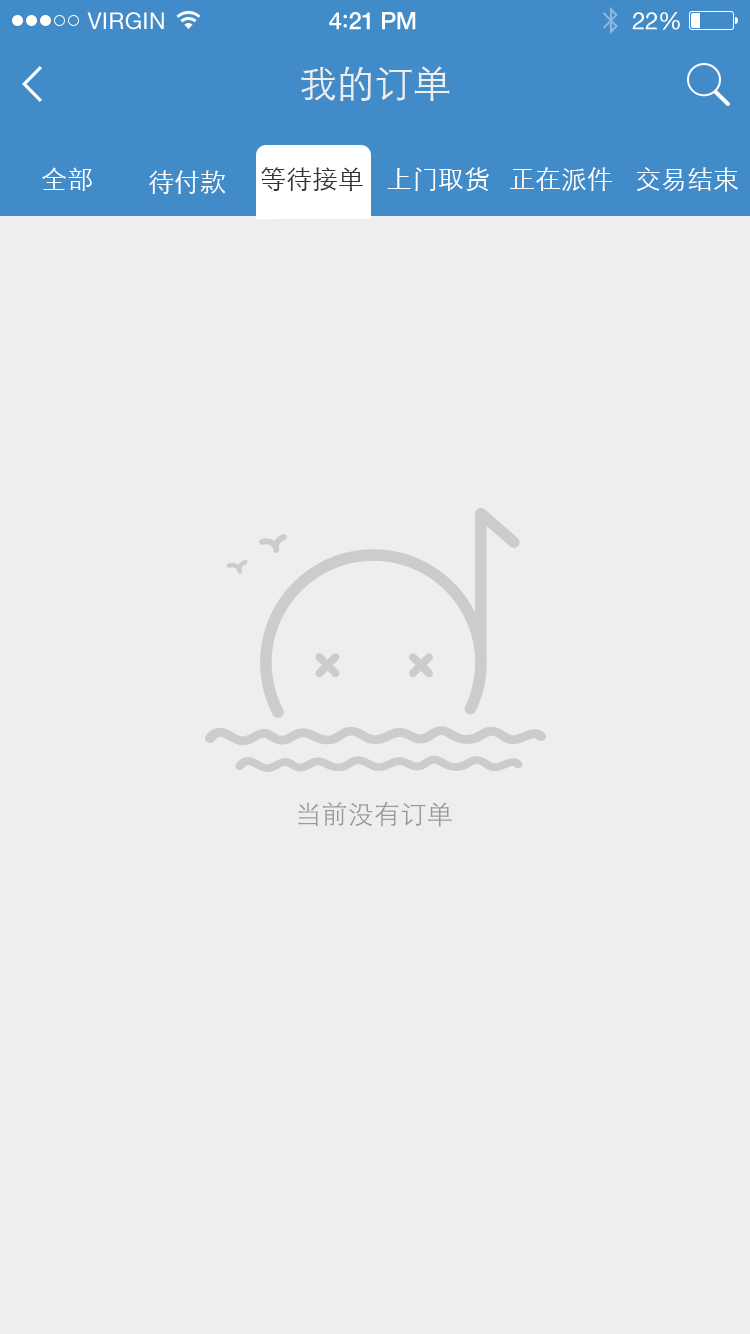
<style>
.page{position:relative;width:750px;height:1334px;background:#eeeeee}
.page>*{position:absolute;margin:0}
.t1{font:23px "HelveticaNeue";letter-spacing:0.02em;color:#ffffff}
.t2{font:24px "HelveticaNeue-Medium";letter-spacing:-0.02em;color:#ffffff}
.t3{font:26px "Avenir-Medium";letter-spacing:-0.02em;color:#ffffff}
.t4{font:24px "HelveticaNeue";letter-spacing:-0.02em;color:#ffffff}
.t5{font:38px "STXihei";color:#eeeeee}
.t6{font:26px "STXihei";color:#ffffff}
.t7{font:26px "STXihei";color:#333333}
.t8{font:26px "STXihei";letter-spacing:0.01em;color:#999999}
</style>
<div class="page">
<p class="t1" style="left:87px;top:12px;width:77px;height:18px">VIRGIN</p>
<p class="t2" style="left:329px;top:12px;width:87px;height:18px">4<span class="t3">:</span>21 PM</p>
<p class="t4" style="left:632px;top:12px;width:48px;height:18px">22%</p>
<p class="t5" style="left:301px;top:66px;width:149px;height:35px">我的订单</p>
<p class="t6" style="left:42px;top:167px;width:50px;height:24px">全部</p>
<p class="t6" style="left:149px;top:170px;width:77px;height:24px">待付款</p>
<p class="t7" style="left:261px;top:167px;width:102px;height:24px">等待接单</p>
<p class="t6" style="left:387px;top:167px;width:102px;height:24px">上门取货</p>
<p class="t6" style="left:510px;top:167px;width:102px;height:24px">正在派件</p>
<p class="t6" style="left:636px;top:167px;width:102px;height:25px">交易结束</p>
<p class="t8" style="left:298px;top:802px;width:154px;height:25px">当前没有订单</p>
</div>
